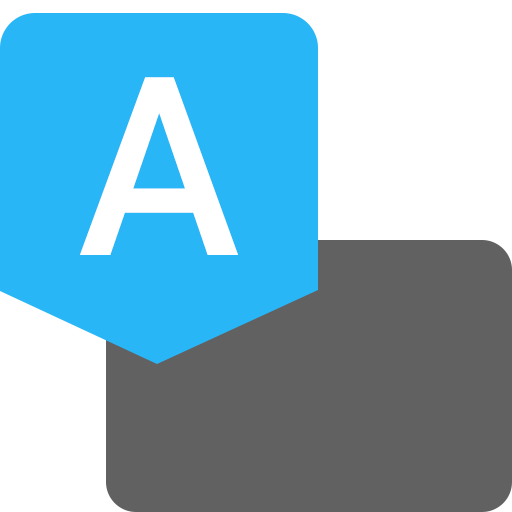
<style>
.page{position:relative;width:512px;height:512px;background:#616161}
.page>*{position:absolute;margin:0}
.t1{font:250px "Roboto-Medium";color:#ffffff}
</style>
<div class="page">
<p class="t1" style="left:80px;top:77px;width:158px;height:178px">A</p>
</div>
